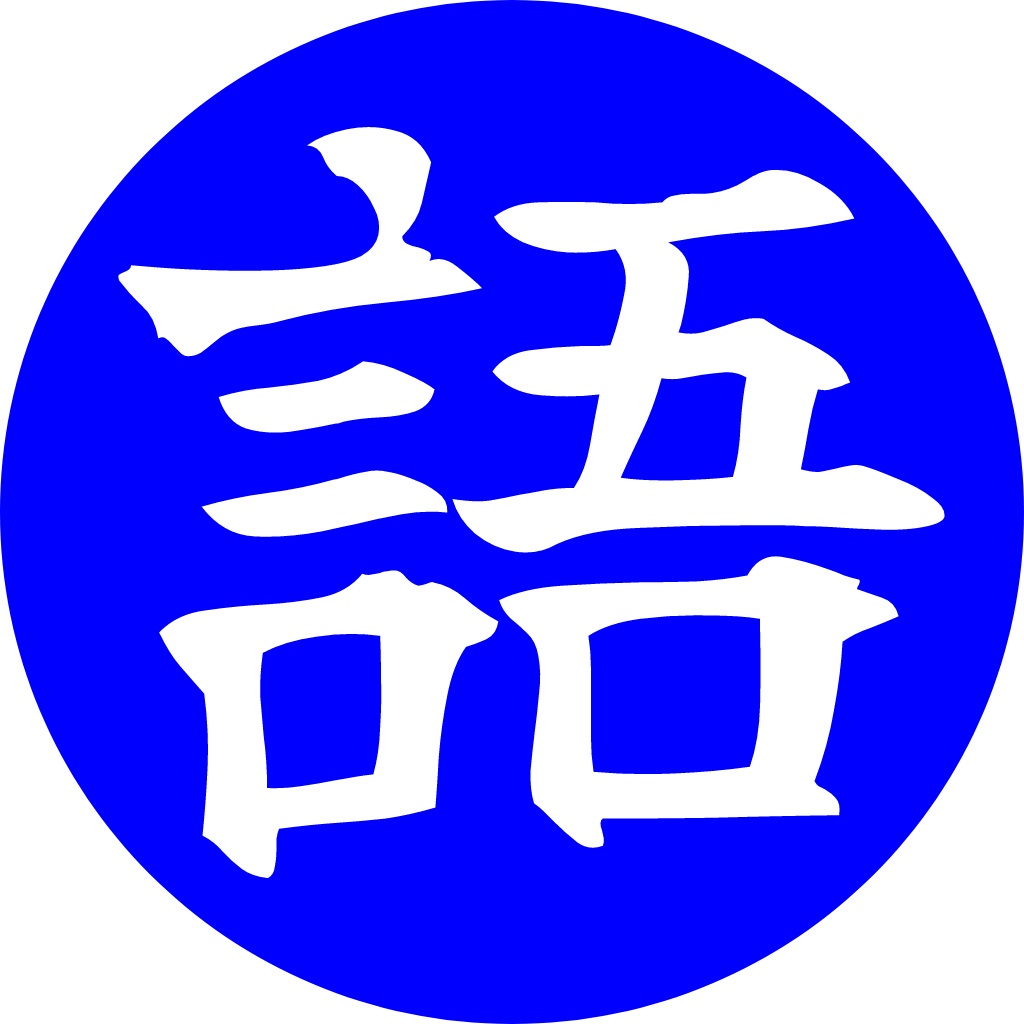
<style>
.page{position:relative;width:1024px;height:1024px;background:#0000ff}
.page>*{position:absolute;margin:0}
.t1{font:850px "YujiBoku-Regular";color:#ffffff}
</style>
<div class="page">
<p class="t1" style="left:117px;top:124px;width:829px;height:755px">語</p>
</div>
